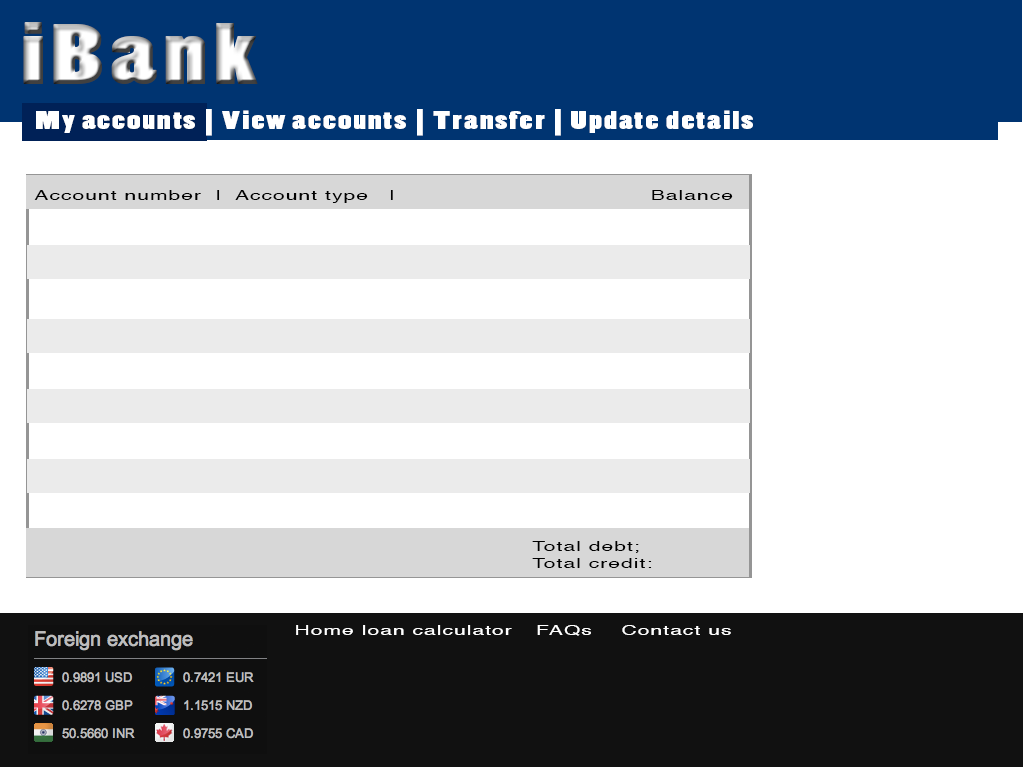
<style>
.page{position:relative;width:1024px;height:768px;background:#ffffff}
.page>*{position:absolute;margin:0}
.t1{font:80px "PoplarStd";letter-spacing:0.05em;scale:1.5 1}
.t2{font:24px "PoplarStd";letter-spacing:0.05em;color:#ffffff;scale:1.5 1}
.t3{font:14px "Helvetica";letter-spacing:0.05em;color:#000000;scale:1.5 1}
.t4{font:14px "Helvetica";letter-spacing:0.05em;color:#ffffff;scale:1.5 1}
</style>
<div class="page">
<p class="t1" style="left:23px;top:22px;width:235px;height:62px">iBank</p>
<p class="t2" style="left:36px;top:109px;width:717px;height:27px">My accounts | View accounts | Transfer | Update details</p>
<p class="t3" style="left:34px;top:190px;width:699px;height:13px">Account number  |  Account type   |                                     Balance</p>
<p class="t3" style="left:532px;top:541px;width:120px;height:27px">Total debt;<br>Total credit:</p>
<p class="t4" style="left:296px;top:625px;width:216px;height:10px">Home loan calculator</p>
<p class="t4" style="left:537px;top:625px;width:54px;height:11px">FAQs</p>
<p class="t4" style="left:622px;top:625px;width:109px;height:10px">Contact us</p>
</div>
